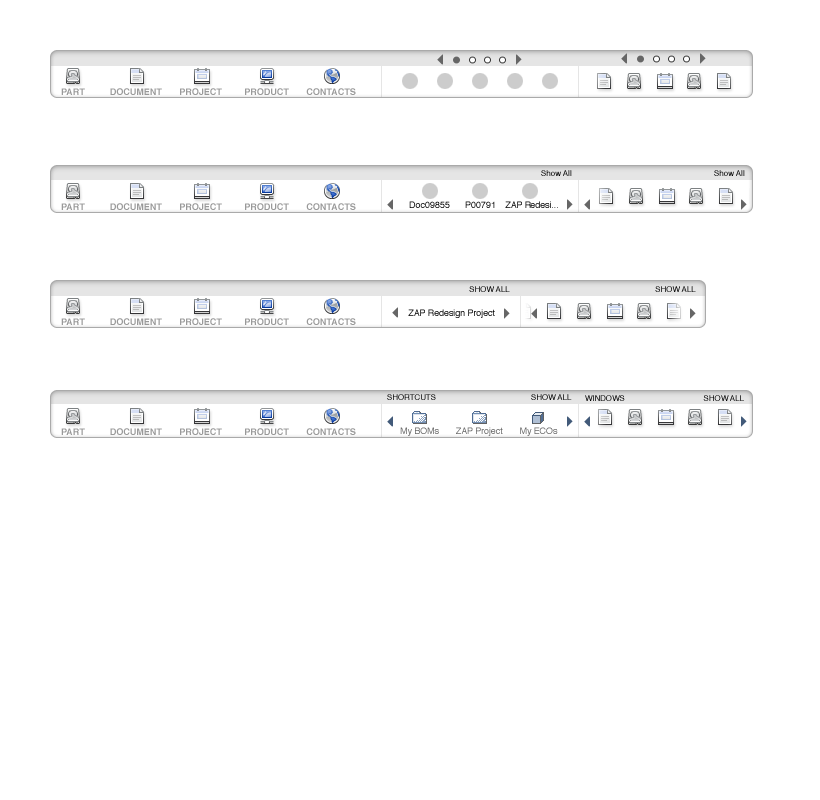
<style>
.page{position:relative;width:820px;height:800px;background:#ffffff}
.page>*{position:absolute;margin:0}
.t1{font:9px "Helvetica-Bold";color:#999999}
.t2{font:8px "Helvetica";color:#000000}
.t3{font:9px "Helvetica"}
.t4{font:9px "Helvetica";letter-spacing:-0.01em}
.t5{font:9px "Helvetica";letter-spacing:-0.1em}
.t6{font:8px "Helvetica";letter-spacing:-0.01em}
.t7{font:8px "Helvetica";letter-spacing:-0.01em;color:#000000}
.t8{font:9px "Helvetica";letter-spacing:-0.01em;color:#666666}
</style>
<div class="page">
<p class="t1" style="left:61px;top:88px;width:295px;height:7px">PART          DOCUMENT       PROJECT         PRODUCT       CONTACTS</p>
<p class="t2" style="left:541px;top:170px;width:31px;height:6px">Show All</p>
<p class="t2" style="left:714px;top:170px;width:31px;height:6px">Show All</p>
<p class="t1" style="left:61px;top:203px;width:295px;height:7px">PART          DOCUMENT       PROJECT         PRODUCT       CONTACTS</p>
<p class="t3" style="left:409px;top:201px;width:41px;height:7px">Doc09855</p>
<p class="t3" style="left:465px;top:201px;width:30px;height:7px">P00791</p>
<p class="t4" style="left:505px;top:201px;width:53px;height:7px">ZA<span class="t5">P  R</span>edesi...</p>
<p class="t6" style="left:469px;top:286px;width:41px;height:6px">SHOW ALL</p>
<p class="t6" style="left:655px;top:286px;width:41px;height:6px">SHOW ALL</p>
<p class="t1" style="left:61px;top:318px;width:295px;height:7px">PART          DOCUMENT       PROJECT         PRODUCT       CONTACTS</p>
<p class="t4" style="left:408px;top:309px;width:281px;height:9px">ZAP Redesign Project   Doc0985   P00791</p>
<p class="t7" style="left:387px;top:394px;width:185px;height:6px">SHORTCUTS    SHOW ALL</p>
<p class="t7" style="left:585px;top:395px;width:159px;height:6px">WINDOWS        SHOW ALL</p>
<p class="t1" style="left:61px;top:428px;width:295px;height:7px">PART          DOCUMENT       PROJECT         PRODUCT       CONTACTS</p>
<p class="t8" style="left:400px;top:427px;width:158px;height:9px">My BOMs       ZAP Project       My ECOs</p>
</div>
